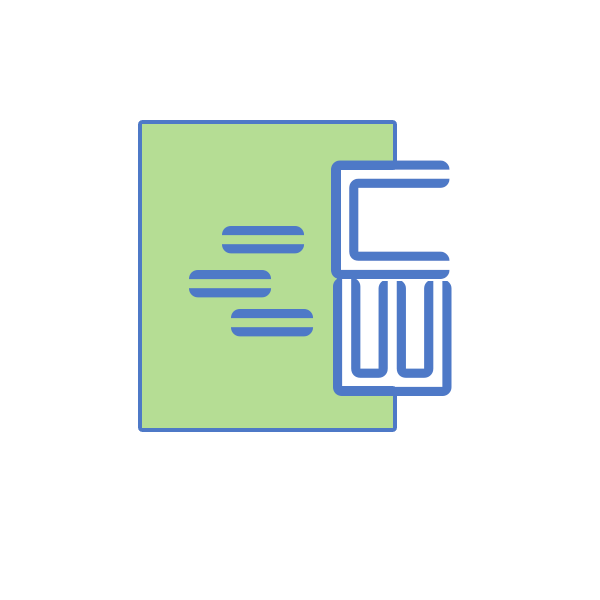
<style>
.page{position:relative;width:600px;height:600px;background:#ffffff}
.page>*{position:absolute;margin:0}
.t1{font:145.8px "Liner";letter-spacing:0.01em;color:#4e79c7}
</style>
<div class="page">
<p class="t1" style="left:331px;top:160px;width:119px;height:119px">C</p>
</div>
